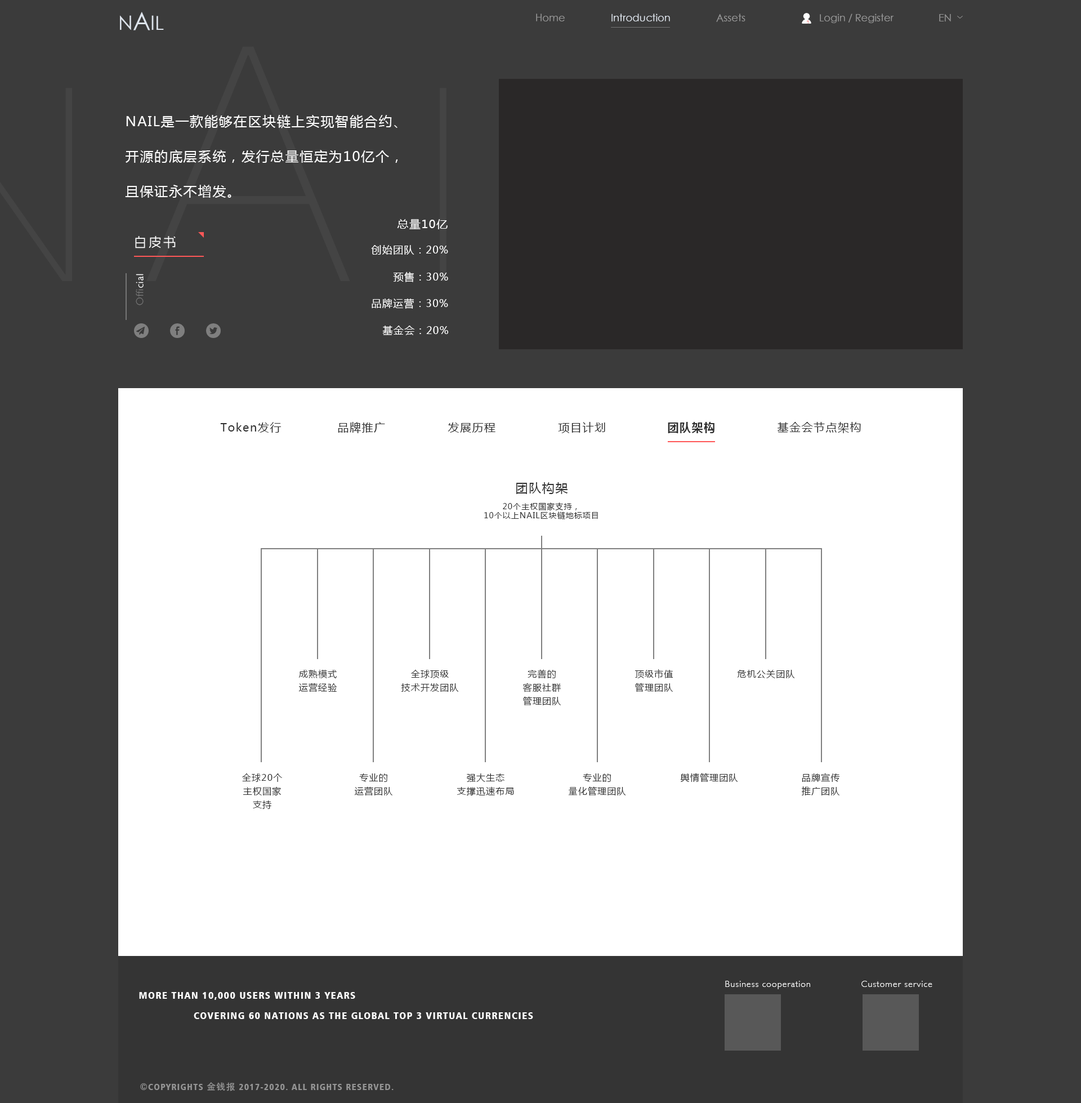
<style>
.page{position:relative;width:1081px;height:1103px;background:#ffffff}
.page>*{position:absolute;margin:0}
.t1{font:19.7px "STXihei";color:#dde3eb;text-transform:uppercase}
.t2{font:23.9px "STXihei";color:#dde3eb;text-transform:uppercase}
.t3{font:10.1px "STXihei";color:#949494}
.t4{font:10.1px "STXihei";color:#dde3eb}
.t5{font:13.5px/35px "MicrosoftYaHei";letter-spacing:0.075em;color:#ffffff}
.t6{font:11.3px "MicrosoftYaHei";letter-spacing:0.075em;color:#ffffff}
.t7{font:13.5px "RTWSShangGoG0v1-Regular";letter-spacing:0.075em;color:#ffffff}
.t8{font:10.1px "MicrosoftYaHei";letter-spacing:0.075em;color:#ffffff}
.t9{font:10.1px "Humanist521BT-Light";letter-spacing:0.075em;color:#757575}
.t10{font:10.1px "Humanist521BT-Light";letter-spacing:0.075em;color:#ffffff}
.t11{font:11.3px "MicrosoftYaHei";letter-spacing:0.075em;color:#252832}
.t12{font:11.3px "MicrosoftYaHei-Bold";letter-spacing:0.075em;color:#252832}
.t13{font:12.4px "MicrosoftYaHei";letter-spacing:0.075em;color:#252832}
.t14{font:7.9px/9px "MicrosoftYaHei";letter-spacing:0.075em;color:#252832}
.t15{font:9px/13.5px "MicrosoftYaHei";letter-spacing:0.075em;color:#252832}
.t16{font:9px "MicrosoftYaHei";letter-spacing:0.075em;color:#252832}
.t17{font:9px "Humanist521BT-Light";letter-spacing:0.075em;color:#ffffff}
.t18{font:10.1px/20.3px "Humanist777BT-BlackCondensedB";letter-spacing:0.075em;color:#ffffff;text-transform:uppercase}
.t19{font:9px "Humanist777BT-BlackCondensedB";letter-spacing:0.075em;color:#949494;text-transform:uppercase}
.t20{font:9px "AdobeHeitiStd-Regular";letter-spacing:0.075em;color:#949494;text-transform:uppercase}
</style>
<div class="page">
<p class="t1" style="left:120px;top:12px;width:44px;height:18px">N<span class="t2">A</span>IL</p>
<p class="t3" style="left:536px;top:14px;width:29px;height:7px">Home</p>
<p class="t4" style="left:612px;top:14px;width:58px;height:8px">Introduction</p>
<p class="t3" style="left:716px;top:14px;width:30px;height:8px">Assets</p>
<p class="t3" style="left:820px;top:14px;width:74px;height:9px">Login / Register</p>
<p class="t3" style="left:939px;top:14px;width:12px;height:8px">EN</p>
<p class="t5" style="left:125px;top:115px;width:273px;height:83px;text-align:justify">NAIL是一款能够在区块链上实现智能合约、<br>开源的底层系统，发行总量恒定为10亿个，<br>且保证永不增发。</p>
<p class="t6" style="left:397px;top:219px;width:51px;height:10px">总量10亿</p>
<p class="t7" style="left:135px;top:236px;width:41px;height:12px">白皮书</p>
<p class="t8" style="left:371px;top:245px;width:77px;height:10px">创始团队：20%</p>
<p class="t9" style="left:136px;top:274px;width:8px;height:31px;rotate:-90deg">Offi<span class="t10">cial</span></p>
<p class="t8" style="left:393px;top:271px;width:55px;height:11px">预售：30%</p>
<p class="t8" style="left:372px;top:298px;width:76px;height:11px">品牌运营：30%</p>
<p class="t8" style="left:382px;top:326px;width:67px;height:9px">基金会：20%</p>
<p class="t11" style="left:220px;top:422px;width:62px;height:11px">Token发行</p>
<p class="t11" style="left:338px;top:422px;width:47px;height:11px">品牌推广</p>
<p class="t11" style="left:448px;top:422px;width:48px;height:11px">发展历程</p>
<p class="t11" style="left:558px;top:422px;width:47px;height:11px">项目计划</p>
<p class="t12" style="left:668px;top:422px;width:47px;height:11px">团队架构</p>
<p class="t11" style="left:778px;top:422px;width:83px;height:11px">基金会节点架构</p>
<p class="t13" style="left:516px;top:482px;width:52px;height:12px">团队构架</p>
<p class="t14" style="left:484px;top:502px;width:114px;height:17px;text-align:center">20个主权国家支持，<br>10个以上NAIL区块链地标项目</p>
<p class="t15" style="left:298px;top:669px;width:39px;height:23px;text-align:center">成熟模式<br>运营经验</p>
<p class="t15" style="left:401px;top:670px;width:58px;height:22px;text-align:center">全球顶级<br>技术开发团队</p>
<p class="t15" style="left:523px;top:669px;width:38px;height:36px;text-align:center">完善的<br>客服社群<br>管理团队</p>
<p class="t15" style="left:635px;top:669px;width:39px;height:23px;text-align:center">顶级市值<br>管理团队</p>
<p class="t16" style="left:737px;top:670px;width:58px;height:8px">危机公关团队</p>
<p class="t15" style="left:242px;top:773px;width:40px;height:36px;text-align:center">全球20个<br>主权国家<br>支持</p>
<p class="t15" style="left:355px;top:773px;width:38px;height:23px;text-align:center">专业的<br>运营团队</p>
<p class="t15" style="left:457px;top:773px;width:57px;height:23px;text-align:center">强大生态<br>支撑迅速布局</p>
<p class="t15" style="left:568px;top:773px;width:58px;height:23px;text-align:center">专业的<br>量化管理团队</p>
<p class="t16" style="left:680px;top:773px;width:58px;height:9px">舆情管理团队</p>
<p class="t15" style="left:802px;top:773px;width:38px;height:22px;text-align:center">品牌宣传<br>推广团队</p>
<p class="t17" style="left:725px;top:981px;width:85px;height:8px">Business cooperation</p>
<p class="t17" style="left:862px;top:981px;width:71px;height:6px">Customer service</p>
<p class="t18" style="left:139px;top:992px;width:394px;height:27px;text-align:justify">More than 10,000 users within 3 years<br>                Covering 60 nations as the global top 3 virtual currencies</p>
<p class="t19" style="left:140px;top:1082px;width:254px;height:9px">©Copyrights <span class="t20">金钱报</span> 2017-2020. All rights reserved.</p>
</div>
